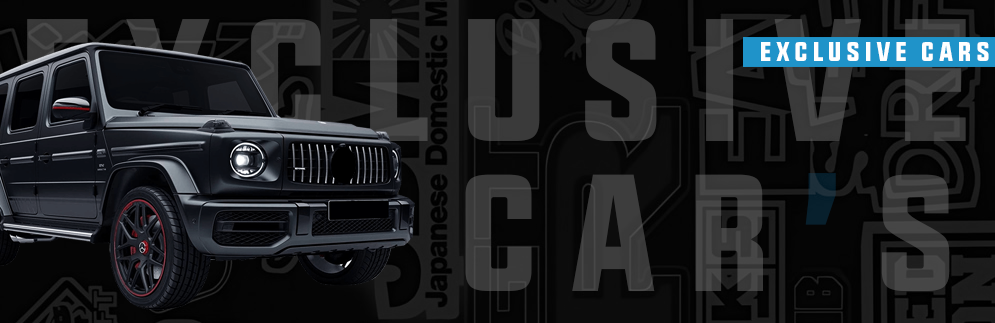
<style>
.page{position:relative;width:995px;height:323px}
.page>*{position:absolute;margin:0}
.t1{font:173.9px "UpboltersNew";letter-spacing:0.18em;color:#3a3a3a;text-transform:uppercase}
.t2{font:27px "UpboltersNew";letter-spacing:0.18em;color:#ffffff;text-transform:uppercase}
.t3{font:165.5px "UpboltersNew";letter-spacing:0.18em;color:#3a3a3a;text-transform:uppercase}
</style>
<div class="page">
<p class="t1" style="left:27px;top:19px;width:939px;height:122px">Exclusive</p>
<p class="t2" style="left:761px;top:42px;width:228px;height:19px">Exclusive cars</p>
<p class="t3" style="left:465px;top:173px;width:485px;height:118px">Car’s</p>
</div>
